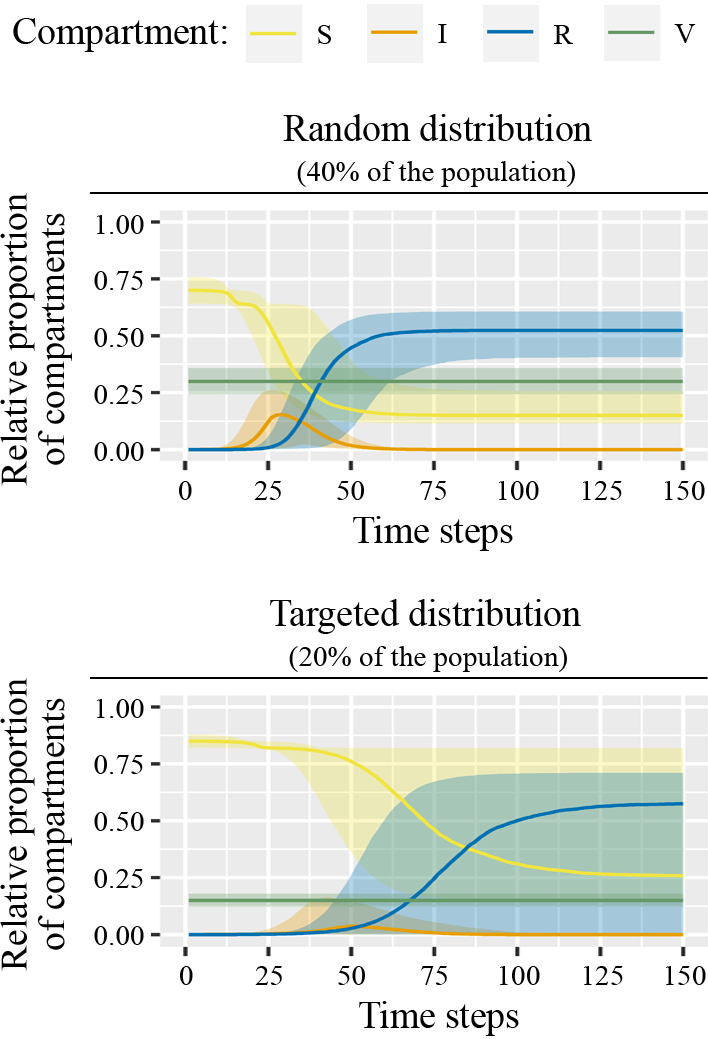
<style>
.page{position:relative;width:708px;height:1039px;background:#ffffff}
.page>*{position:absolute;margin:0}
.t1{font:37.5px "TimesNewRomanPSMT";color:#010101}
.t2{font:29.2px "TimesNewRomanPSMT";color:#010101}
.t3{font:37.5px/37.5px "TimesNewRomanPSMT";color:#010101}
</style>
<div class="page">
<p class="t1" style="left:13px;top:18px;width:214px;height:34px">Compartment:</p>
<p class="t2" style="left:318px;top:25px;width:13px;height:19px">S</p>
<p class="t2" style="left:438px;top:24px;width:9px;height:19px">I</p>
<p class="t2" style="left:554px;top:25px;width:19px;height:19px">R</p>
<p class="t2" style="left:674px;top:24px;width:22px;height:19px">V</p>
<p class="t1" style="left:283px;top:114px;width:309px;height:27px">Random distribution</p>
<p class="t2" style="left:297px;top:161px;width:278px;height:26px">(40% of the population)</p>
<p class="t3" style="left:0px;top:193px;width:72px;height:293px;text-align:center;rotate:-90deg">Relative proportion<br>of compartments</p>
<p class="t2" style="left:97px;top:215px;width:47px;height:19px">1.00</p>
<p class="t2" style="left:94px;top:271px;width:49px;height:19px">0.75</p>
<p class="t2" style="left:94px;top:328px;width:50px;height:19px">0.50</p>
<p class="t2" style="left:94px;top:385px;width:49px;height:19px">0.25</p>
<p class="t2" style="left:94px;top:442px;width:50px;height:19px">0.00</p>
<p class="t2" style="left:179px;top:481px;width:13px;height:19px">0</p>
<p class="t2" style="left:254px;top:481px;width:27px;height:19px">25</p>
<p class="t2" style="left:337px;top:481px;width:27px;height:19px">50</p>
<p class="t2" style="left:420px;top:481px;width:26px;height:19px">75</p>
<p class="t2" style="left:499px;top:481px;width:40px;height:19px">100</p>
<p class="t2" style="left:583px;top:481px;width:39px;height:19px">125</p>
<p class="t2" style="left:665px;top:481px;width:40px;height:19px">150</p>
<p class="t1" style="left:353px;top:516px;width:160px;height:35px">Time steps</p>
<p class="t1" style="left:270px;top:599px;width:311px;height:35px">Targeted distribution</p>
<p class="t2" style="left:289px;top:646px;width:278px;height:26px">(20% of the population)</p>
<p class="t3" style="left:0px;top:678px;width:72px;height:293px;text-align:center;rotate:-90deg">Relative proportion<br>of compartments</p>
<p class="t2" style="left:97px;top:699px;width:47px;height:19px">1.00</p>
<p class="t2" style="left:94px;top:755px;width:49px;height:19px">0.75</p>
<p class="t2" style="left:94px;top:812px;width:50px;height:19px">0.50</p>
<p class="t2" style="left:94px;top:869px;width:49px;height:19px">0.25</p>
<p class="t2" style="left:94px;top:926px;width:50px;height:19px">0.00</p>
<p class="t2" style="left:180px;top:966px;width:13px;height:19px">0</p>
<p class="t2" style="left:255px;top:966px;width:27px;height:19px">25</p>
<p class="t2" style="left:338px;top:966px;width:27px;height:19px">50</p>
<p class="t2" style="left:421px;top:966px;width:26px;height:19px">75</p>
<p class="t2" style="left:500px;top:966px;width:40px;height:19px">100</p>
<p class="t2" style="left:584px;top:966px;width:39px;height:19px">125</p>
<p class="t2" style="left:666px;top:966px;width:40px;height:19px">150</p>
<p class="t1" style="left:359px;top:1001px;width:160px;height:35px">Time steps</p>
</div>
